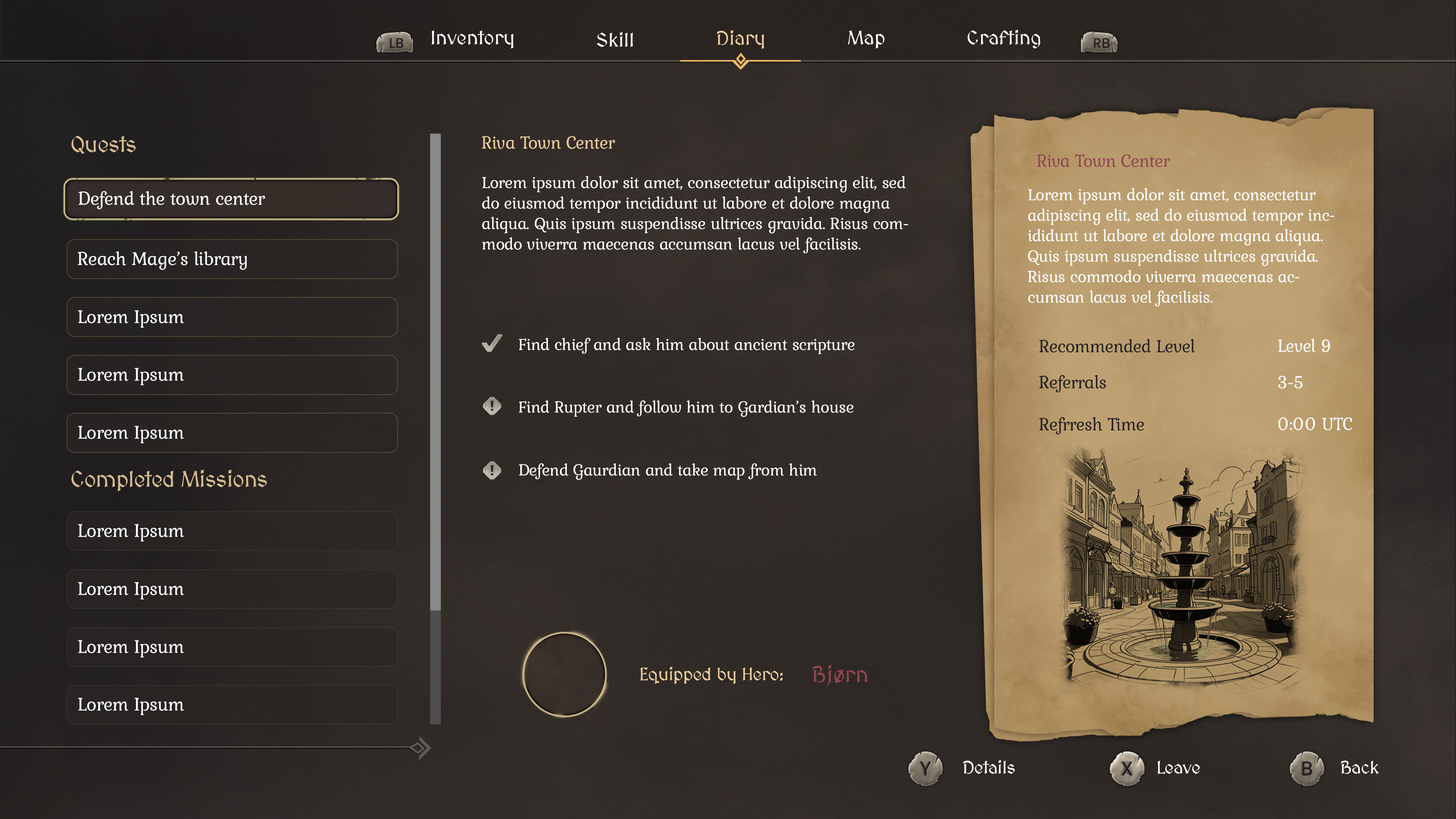
<style>
.page{position:relative;width:1456px;height:819px}
.page>*{position:absolute;margin:0}
.t1{font:19.8px "MedievalSharp";color:#ebcd9e}
.t2{font:19.8px "MedievalSharp";color:#ffffff}
.t3{font:22.7px "MedievalSharp";letter-spacing:-0.02em;color:#d7bb91}
.t4{font:18.2px "Kurale-Regular";letter-spacing:-0.02em;color:#ebcd9e}
.t5{font:18.2px "Kurale-Regular";letter-spacing:-0.02em;color:#924552}
.t6{font:17.1px "Kurale-Regular";letter-spacing:-0.02em;color:#ffffff}
.t7{font:19.2px "Kurale-Regular";letter-spacing:-0.02em;color:#ffffff}
.t8{font:18.2px "Kurale-Regular";letter-spacing:-0.02em;color:#222021}
.t9{font:18.2px "Kurale-Regular";letter-spacing:-0.02em;color:#ffffff}
.t10{font:22.7px "MedievalSharp";color:#924552}
.t11{font:18.2px "MedievalSharp";letter-spacing:-0.02em;color:#ecce9f}
.t12{font:18.2px "MedievalSharp";letter-spacing:-0.02em;color:#ffffff}
</style>
<div class="page">
<p class="t1" style="left:717px;top:30px;width:47px;height:19px">Diary</p>
<p class="t2" style="left:968px;top:30px;width:72px;height:19px">Crafting</p>
<p class="t2" style="left:431px;top:30px;width:83px;height:19px">Inventory</p>
<p class="t2" style="left:597px;top:32px;width:36px;height:15px">Skill</p>
<p class="t2" style="left:848px;top:30px;width:37px;height:19px">Map</p>
<p class="t3" style="left:71px;top:136px;width:65px;height:18px">Quests</p>
<p class="t4" style="left:482px;top:136px;width:133px;height:13px">Riva Town Center</p>
<p class="t5" style="left:1037px;top:154px;width:133px;height:13px">Riva Town Center</p>
<p class="t6" style="left:482px;top:176px;width:426px;height:77px">Lorem ipsum dolor sit amet, consectetur adipiscing elit, sed do eiusmod tempor incididunt ut labore et dolore magna aliqua. Quis ipsum suspendisse ultrices gravida. Risus commodo viverra maecenas accumsan lacus vel facilisis.</p>
<p class="t7" style="left:78px;top:191px;width:187px;height:18px">Defend the town center</p>
<p class="t6" style="left:1028px;top:188px;width:307px;height:118px">Lorem ipsum dolor sit amet, consectetur adipiscing elit, sed do eiusmod tempor incididunt ut labore et dolore magna aliqua. Quis ipsum suspendisse ultrices gravida. Risus commodo viverra maecenas accumsan lacus vel facilisis.</p>
<p class="t7" style="left:77px;top:251px;width:170px;height:19px">Reach Mage’s library</p>
<p class="t7" style="left:78px;top:310px;width:106px;height:18px">Lorem Ipsum</p>
<p class="t6" style="left:519px;top:338px;width:336px;height:16px">Find chief and ask him about ancient scripture</p>
<p class="t8" style="left:1039px;top:339px;width:156px;height:14px">Recommended Level</p>
<p class="t9" style="left:1278px;top:339px;width:52px;height:13px">Level 9</p>
<p class="t7" style="left:78px;top:368px;width:106px;height:17px">Lorem Ipsum</p>
<p class="t8" style="left:1039px;top:375px;width:67px;height:17px">Referrals</p>
<p class="t9" style="left:1278px;top:376px;width:25px;height:13px">3-5</p>
<p class="t6" style="left:519px;top:400px;width:334px;height:17px">Find Rupter and follow him to Gardian’s house</p>
<p class="t7" style="left:78px;top:426px;width:106px;height:17px">Lorem Ipsum</p>
<p class="t8" style="left:1039px;top:417px;width:105px;height:18px">Refrresh Time</p>
<p class="t9" style="left:1278px;top:417px;width:74px;height:13px">0:00 UTC</p>
<p class="t3" style="left:71px;top:469px;width:196px;height:22px">Completed Missions</p>
<p class="t6" style="left:519px;top:463px;width:298px;height:17px">Defend Gaurdian and take map from him</p>
<p class="t7" style="left:78px;top:524px;width:106px;height:17px">Lorem Ipsum</p>
<p class="t7" style="left:78px;top:582px;width:106px;height:17px">Lorem Ipsum</p>
<p class="t7" style="left:78px;top:640px;width:106px;height:17px">Lorem Ipsum</p>
<p class="t10" style="left:812px;top:665px;width:56px;height:22px">Bjørn</p>
<p class="t11" style="left:640px;top:667px;width:143px;height:17px">Equipped by Hero:</p>
<p class="t7" style="left:78px;top:698px;width:106px;height:17px">Lorem Ipsum</p>
<p class="t12" style="left:963px;top:760px;width:52px;height:14px">Details</p>
<p class="t12" style="left:1158px;top:761px;width:42px;height:13px">Leave</p>
<p class="t12" style="left:1341px;top:761px;width:38px;height:13px">Back</p>
</div>
